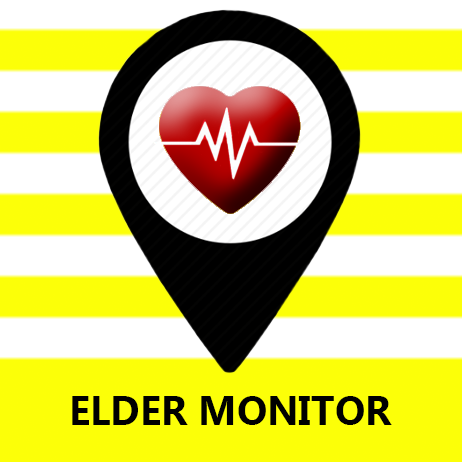
<style>
.page{position:relative;width:462px;height:462px;background:#fcff08}
.page>*{position:absolute;margin:0}
.t1{font:40px "MicrosoftNewTaiLue-Bold";color:#000000}
</style>
<div class="page">
<p class="t1" style="left:72px;top:396px;width:320px;height:29px">ELDER MONITOR</p>
</div>
